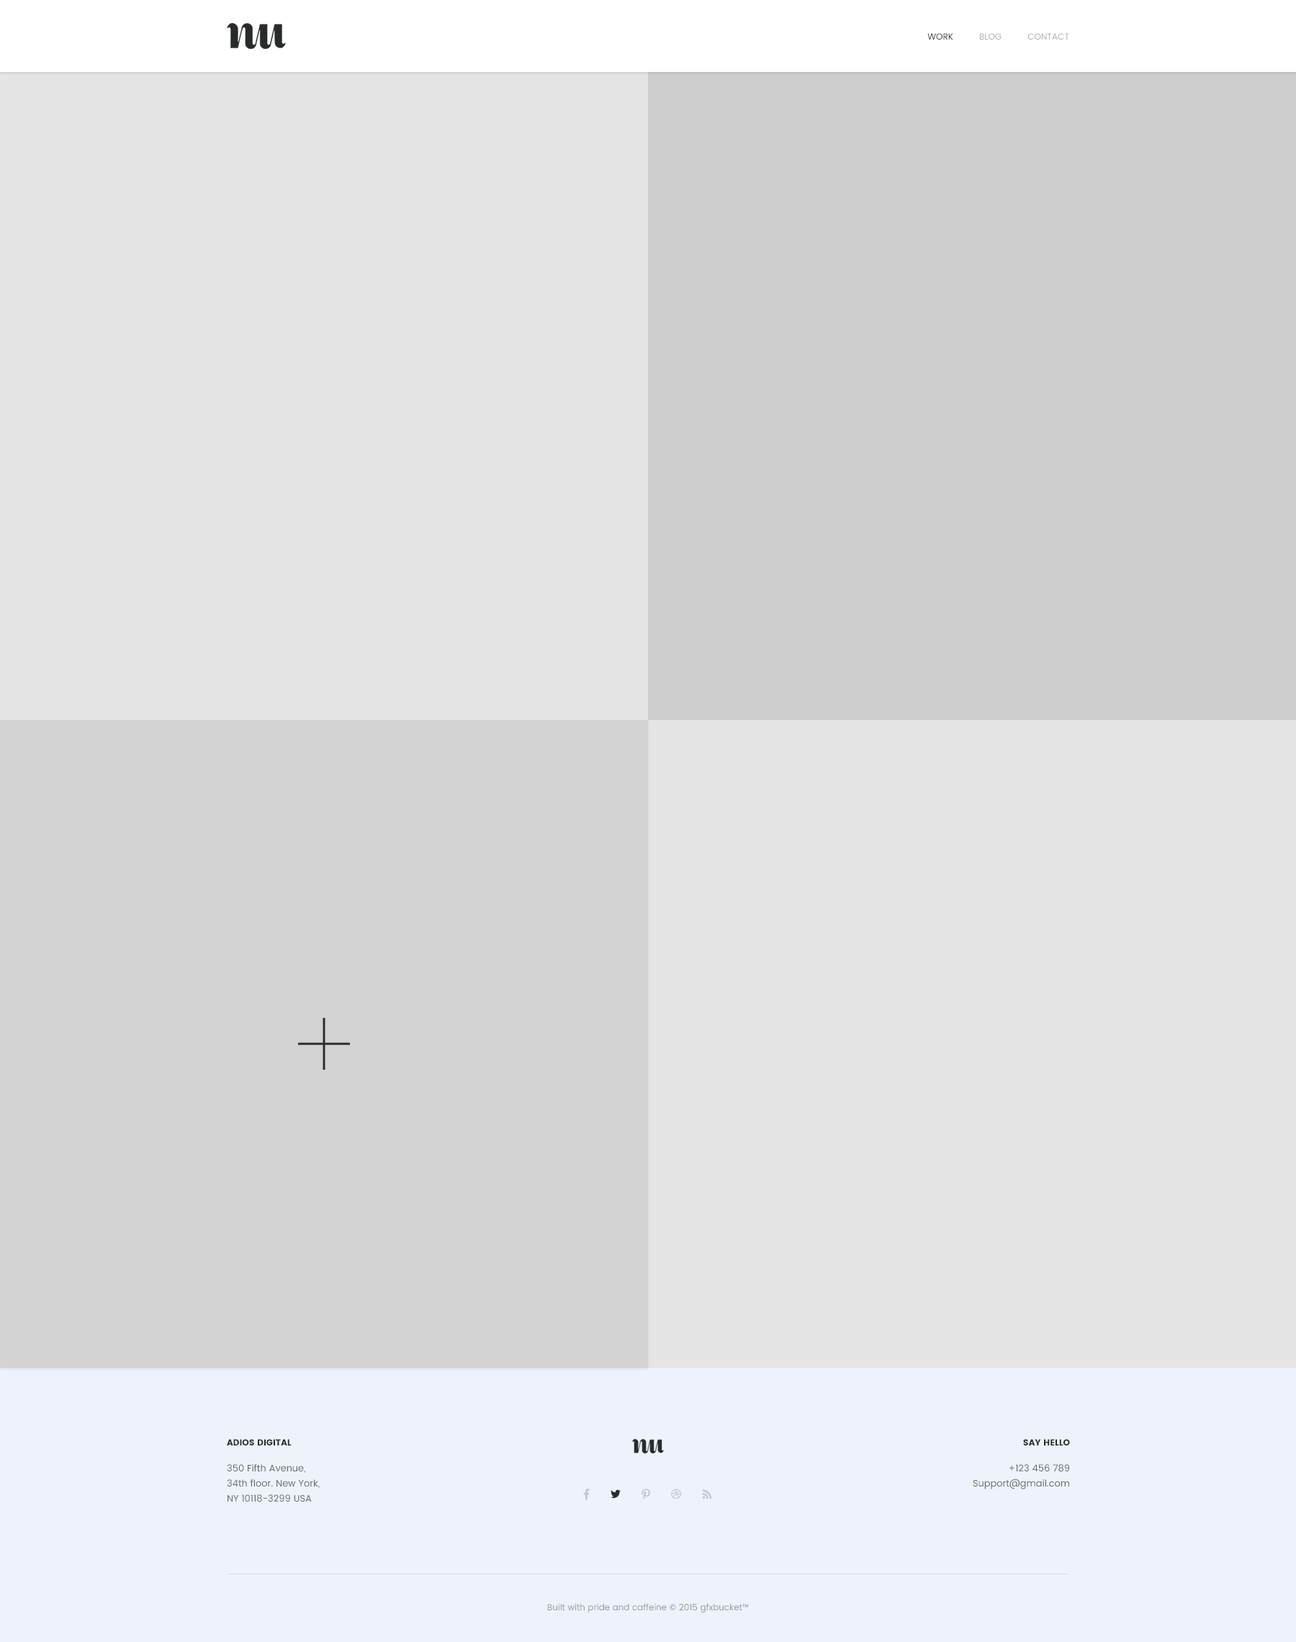
<style>
.page{position:relative;width:1296px;height:1642px;background:#e5e5e5}
.page>*{position:absolute;margin:0}
.t1{font:8.6px "Poppins-Regular";color:#abaeaf;text-transform:uppercase}
.t2{font:8.6px "Poppins-Regular";color:#272b2b;text-transform:uppercase}
.t3{font:9.4px/15px "Poppins-Regular";color:#676a6a}
.t4{font:8.6px/15px "Poppins";color:#272b2b;text-transform:uppercase}
.t5{font:9.4px/25.9px "Poppins-Regular";color:#676a6a}
.t6{font:8.6px "Poppins-Regular";color:#979a9e}
</style>
<div class="page">
<p class="t1" style="left:927px;top:33px;width:142px;height:7px"><span class="t2">         work  </span>        Blog          contact</p>
<p class="t3" style="left:227px;top:1439px;width:93px;height:64px"><span class="t4">Adios digital<br></span><span class="t5">350 Fifth Avenue, <br></span>34th floor. New York, <br>NY 10118-3299 USA</p>
<p class="t3" style="left:973px;top:1439px;width:97px;height:51px;text-align:right"><span class="t4">Say hello<br></span><span class="t5">+123 456 789<br></span>Support@gmail.com</p>
<p class="t6" style="left:547px;top:1603px;width:202px;height:11px">Built with pride and caffeine © 2015 gfxbucket™</p>
</div>
